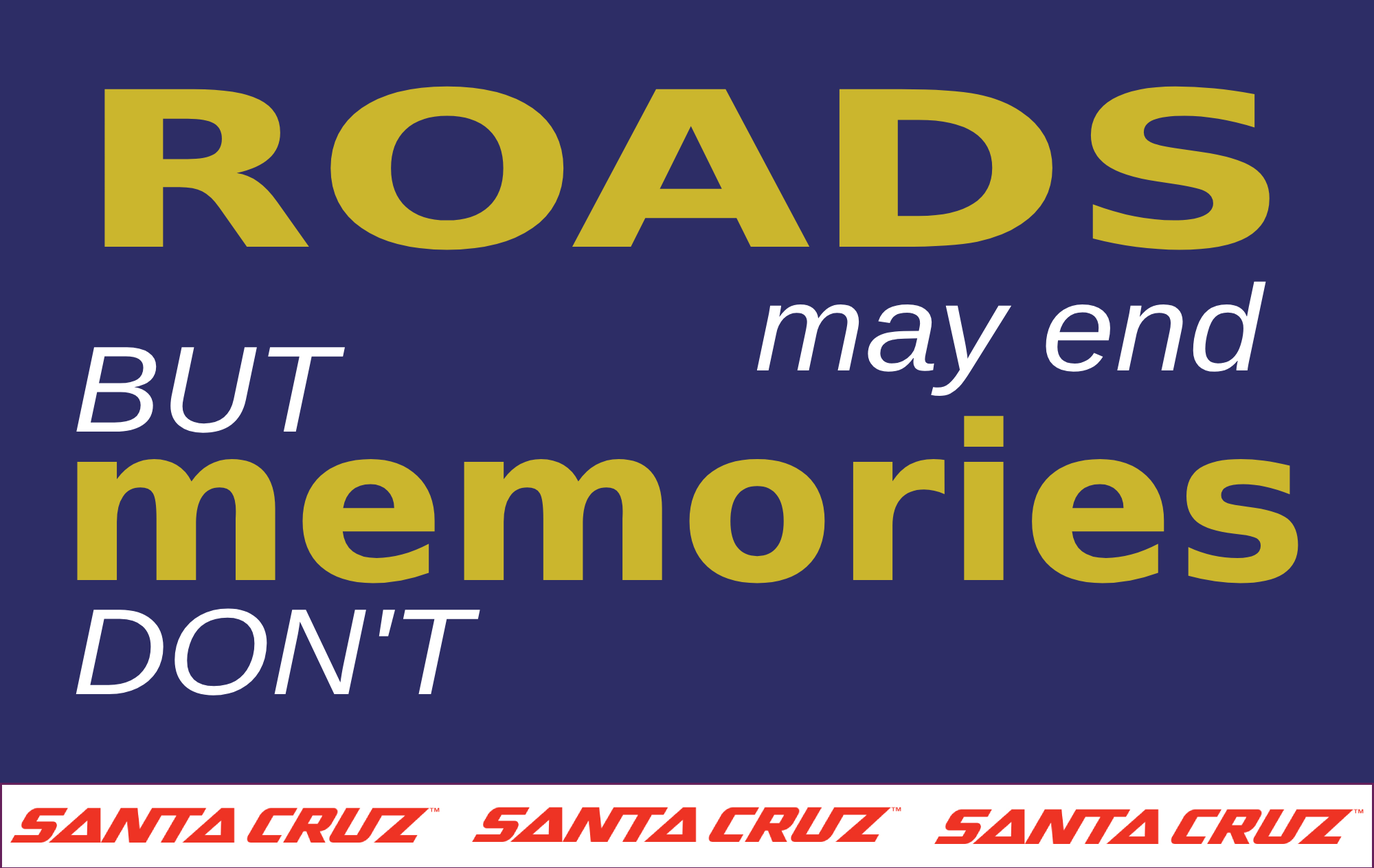
<style>
.page{position:relative;width:1374px;height:868px;background:#2d2d66}
.page>*{position:absolute;margin:0}
.t1{font:216px "Arial-Black";color:#cbb62d;scale:1.44 1}
.t2{font:122.6px "Arial-ItalicMT";color:#ffffff;scale:1.08 1}
.t3{font:216px "Arial-Black";color:#cbb62d;scale:1.04 1}
</style>
<div class="page">
<p class="t1" style="left:104px;top:86px;width:1166px;height:164px">ROADS</p>
<p class="t2" style="left:756px;top:281px;width:510px;height:115px">may end</p>
<p class="t2" style="left:76px;top:347px;width:269px;height:86px">BUT</p>
<p class="t3" style="left:77px;top:416px;width:1222px;height:167px">memories</p>
<p class="t2" style="left:76px;top:608px;width:404px;height:87px">DON'T</p>
</div>
